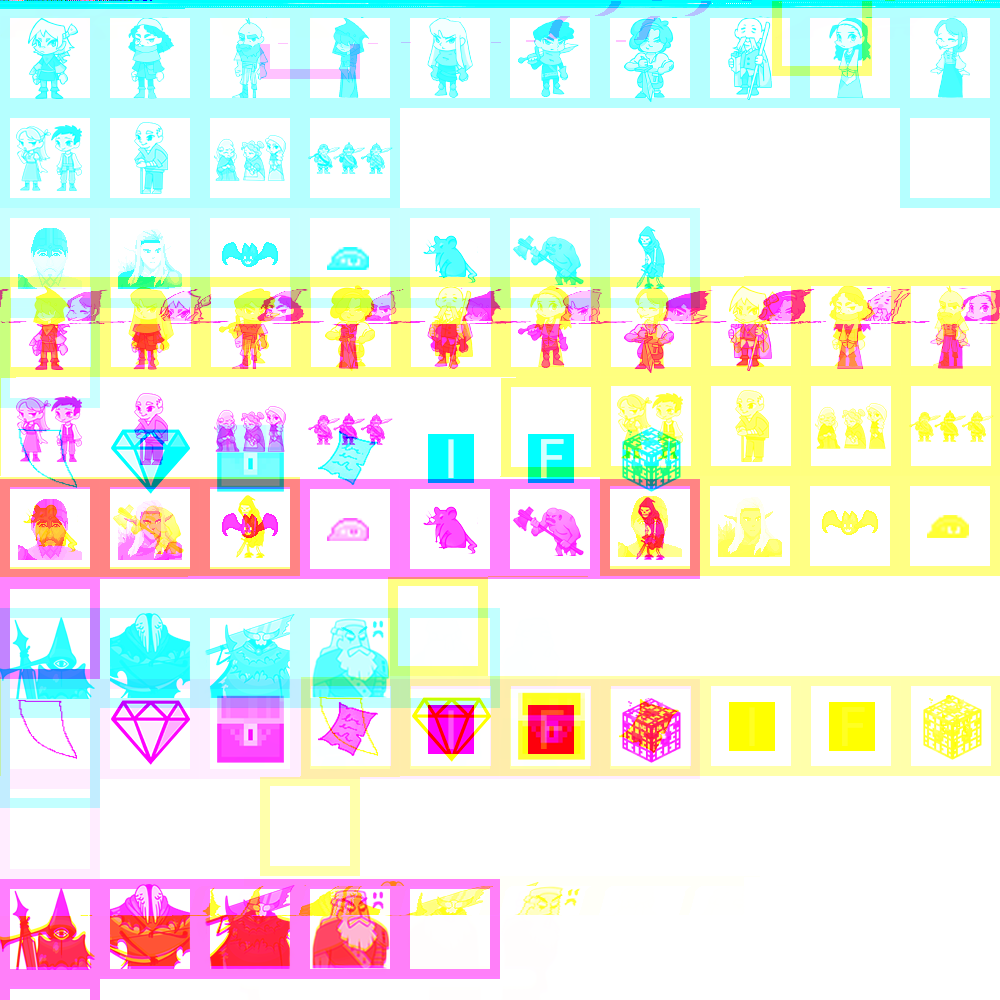
<style>
.page{position:relative;width:1000px;height:1000px;background:#ffffff}
.page>*{position:absolute;margin:0}
.t1{font:53px "DejaVuSans"}
</style>
<div class="page">
<p class="t1" style="left:541px;top:431px;width:23px;height:39px">F</p>
<p class="t1" style="left:541px;top:431px;width:23px;height:39px">F</p>
</div>
